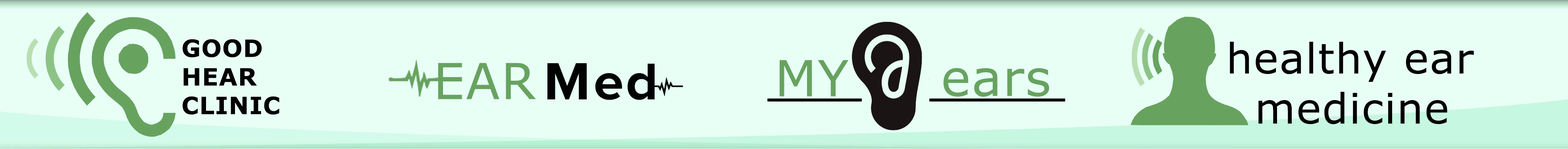
<style>
.page{position:relative;width:1568px;height:149px;background:#e8fff6}
.page>*{position:absolute;margin:0}
.t1{font:23.8px "Verdana-Bold";letter-spacing:0.025em;color:#010101}
.t2{font:41.7px "Verdana";letter-spacing:0.025em;color:#000000}
.t3{font:49.6px "Verdana";letter-spacing:0.025em;color:#67a35f}
</style>
<div class="page">
<p class="t1" style="left:183px;top:39px;width:96px;height:76px">GOOD<br>HEAR<br>CLINIC</p>
<p class="t2" style="left:1230px;top:42px;width:244px;height:82px">healthy ear<br>  medicine</p>
<p class="t3" style="left:438px;top:63px;width:98px;height:36px">EAR</p>
<p class="t3" style="left:780px;top:60px;width:68px;height:36px">MY</p>
<p class="t3" style="left:943px;top:68px;width:106px;height:29px">ears</p>
</div>
